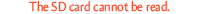
<style>
.page{position:relative;width:200px;height:14px;background:#ffffff}
.page>*{position:absolute;margin:0}
.t1{font:13.2px "Amira-Roman";color:#fe4d2a;scale:0.91 1}
</style>
<div class="page">
<p class="t1" style="left:29px;top:1px;width:141px;height:11px">The SD card cannot be read.</p>
</div>
